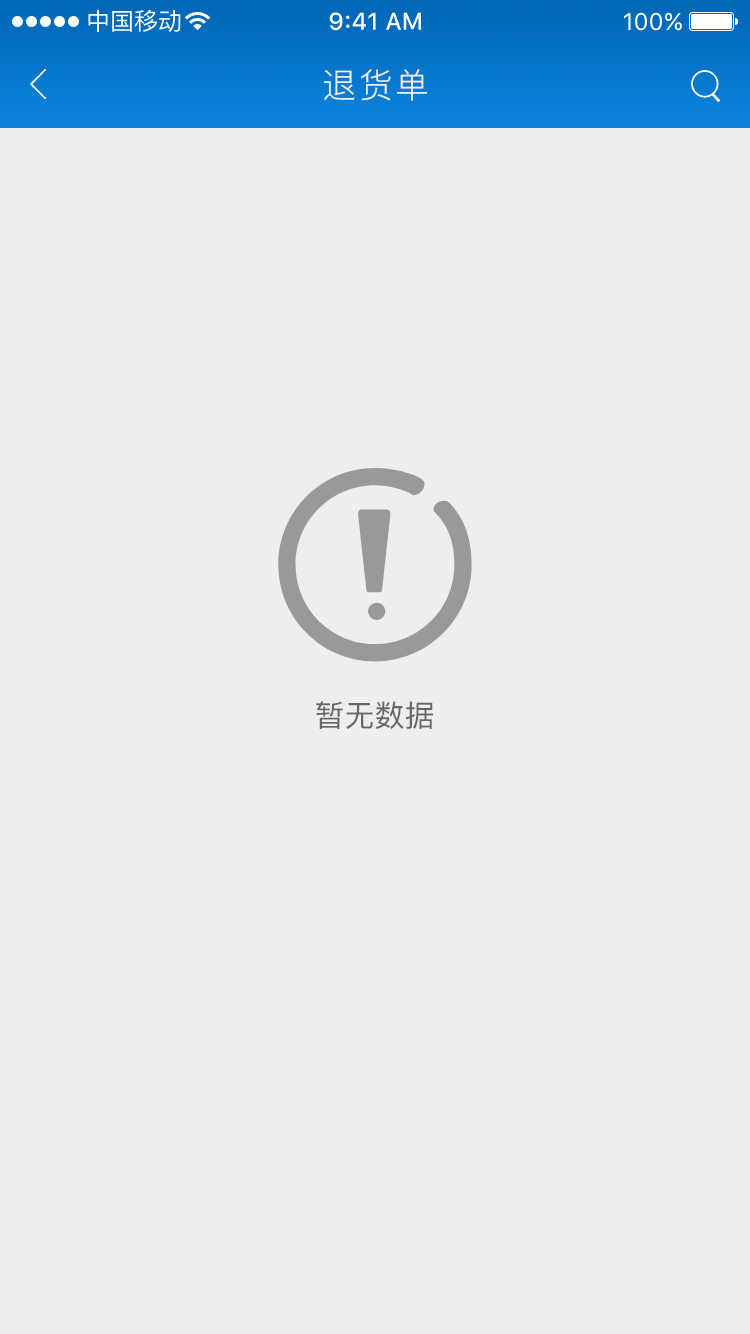
<style>
.page{position:relative;width:750px;height:1334px;background:#eeeeee}
.page>*{position:absolute;margin:0}
.t1{font:34px "PingFang-SC-Regular";letter-spacing:0.06em;color:#eeeeee}
.t2{font:30px "PingFang-SC-Medium";color:#666666}
</style>
<div class="page">
<p class="t1" style="left:324px;top:69px;width:103px;height:32px">退货单</p>
<p class="t2" style="left:316px;top:701px;width:117px;height:28px">暂无数据</p>
</div>
